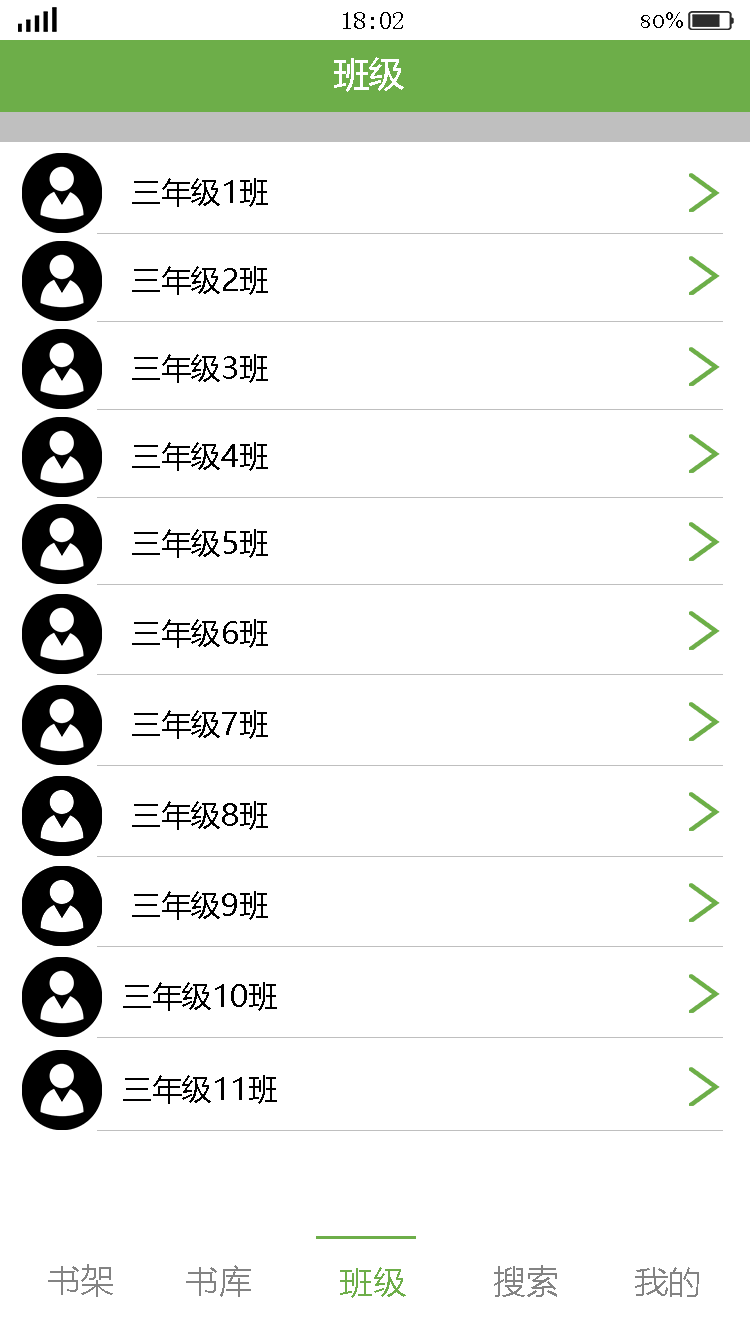
<style>
.page{position:relative;width:750px;height:1334px;background:#ffffff}
.page>*{position:absolute;margin:0}
.t1{font:25px "SimSun";color:#000000}
.t2{font:25px "BellMT";color:#000000}
.t3{font:36px "MicrosoftYaHei";color:#ffffff}
.t4{font:30px "MicrosoftYaHei";color:#000000}
.t5{font:30px "MicrosoftYaHei";color:#010000}
.t6{font:33.3px "MicrosoftYaHei";color:#838383}
.t7{font:33.3px "MicrosoftYaHei";color:#6dae49}
</style>
<div class="page">
<p class="t1" style="left:343px;top:12px;width:60px;height:17px">18:02</p>
<p class="t2" style="left:641px;top:12px;width:42px;height:16px">80%</p>
<p class="t3" style="left:334px;top:57px;width:70px;height:35px">班级</p>
<p class="t4" style="left:132px;top:178px;width:136px;height:29px">三年级1班</p>
<p class="t4" style="left:132px;top:266px;width:136px;height:29px">三年级2班</p>
<p class="t4" style="left:132px;top:354px;width:136px;height:29px">三年级3班</p>
<p class="t4" style="left:132px;top:442px;width:136px;height:29px">三年级4班</p>
<p class="t4" style="left:132px;top:529px;width:136px;height:29px">三年级5班</p>
<p class="t4" style="left:132px;top:619px;width:136px;height:29px">三年级6班</p>
<p class="t4" style="left:132px;top:710px;width:136px;height:29px">三年级7班</p>
<p class="t4" style="left:132px;top:801px;width:136px;height:29px">三年级8班</p>
<p class="t4" style="left:132px;top:891px;width:136px;height:29px">三年级9班</p>
<p class="t4" style="left:123px;top:982px;width:154px;height:29px">三年级10班</p>
<p class="t5" style="left:123px;top:1075px;width:154px;height:29px">三年级11班</p>
<p class="t6" style="left:48px;top:1264px;width:65px;height:33px">书架</p>
<p class="t6" style="left:186px;top:1265px;width:65px;height:32px">书库</p>
<p class="t6" style="left:494px;top:1265px;width:63px;height:32px">搜索</p>
<p class="t7" style="left:340px;top:1267px;width:66px;height:31px">班级</p>
<p class="t6" style="left:635px;top:1267px;width:64px;height:30px">我的</p>
</div>
